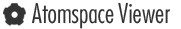
<style>
.page{position:relative;width:181px;height:29px;background:#ffffff}
.page>*{position:absolute;margin:0}
.t1{font:26.5px "FuturaLT-CondensedLight";color:#333333}
</style>
<div class="page">
<p class="t1" style="left:32px;top:2px;width:82px;height:27px">Atomspace</p>
<p class="t1" style="left:118px;top:2px;width:52px;height:22px">Viewer</p>
</div>
